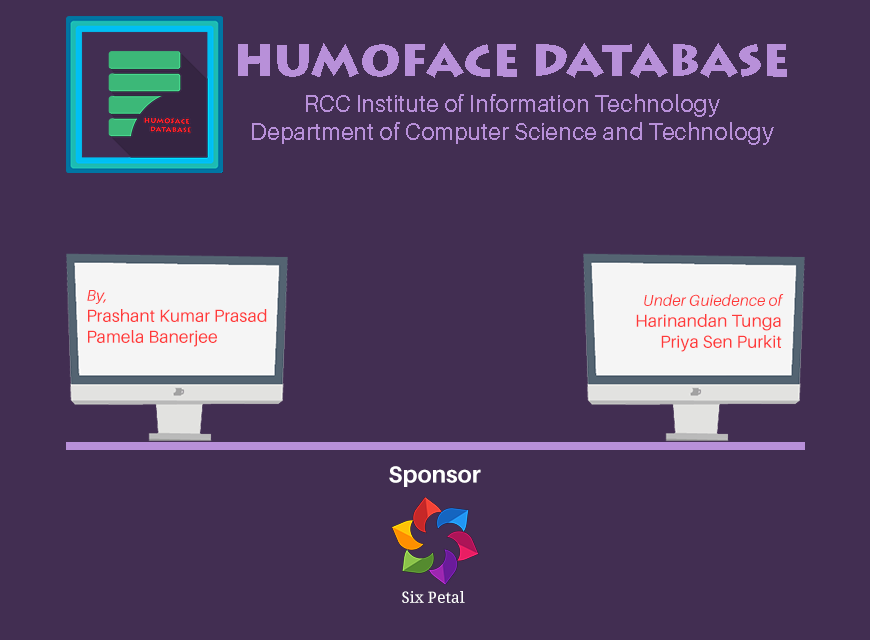
<style>
.page{position:relative;width:870px;height:640px;background:#422e52}
.page>*{position:absolute;margin:0}
.t1{font:44.7px "LithosPro-Black";color:#b890d9}
.t2{font:23.3px "Aileron-Regular";color:#b890d9}
.t3{font:17.5px "Aileron-Regular";color:#ff3b3b}
.t4{font:15.6px "Aileron-Italic";color:#ff3b3b}
.t5{font:17.5px "Aileron-Regular";color:#fe3a3a}
.t6{font:15.6px "Aileron-Italic";color:#fe3a3a}
.t7{font:23.3px "Aileron-Bold";color:#ffffff}
.t8{font:15.6px "DroidSerif";color:#ffffff}
</style>
<div class="page">
<p class="t1" style="left:238px;top:43px;width:549px;height:35px">HUMOFACE DATABASE</p>
<p class="t2" style="left:252px;top:94px;width:522px;height:51px;text-align:center">RCC Institute of Information Technology<br>Department of Computer Science and Technology</p>
<p class="t3" style="left:87px;top:290px;width:180px;height:57px"><span class="t4">By,<br></span>Prashant Kumar Prasad<br>Pamela Banerjee</p>
<p class="t5" style="left:636px;top:294px;width:148px;height:58px;text-align:right"><span class="t6">Under Guiedence of<br></span>Harinandan Tunga<br>Priya Sen Purkit</p>
<p class="t7" style="left:389px;top:466px;width:92px;height:21px">Sponsor</p>
<p class="t8" style="left:402px;top:591px;width:63px;height:12px">Six Petal</p>
</div>
